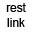
<style>
.page{position:relative;width:32px;height:32px;background:#ffffff}
.page>*{position:absolute;margin:0}
.t1{font:11.8px "ArialMT";color:#000000}
</style>
<div class="page">
<p class="t1" style="left:6px;top:3px;width:20px;height:24px;text-align:center">rest<br>link</p>
</div>
